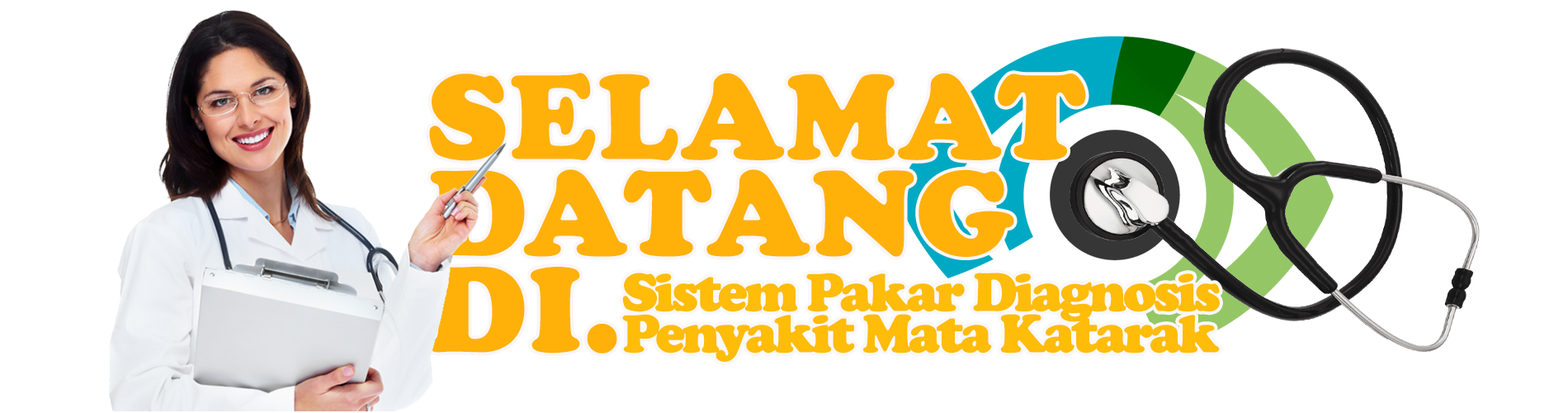
<style>
.page{position:relative;width:1568px;height:413px;background:#ffffff}
.page>*{position:absolute;margin:0}
.t1{font:123.8px/96.3px "CooperBlack";letter-spacing:-0.005em;color:#ffb109;font-weight:bold}
.t2{font:55.2px/41.3px "CooperBlack";letter-spacing:-0.075em;color:#ffbc09;font-weight:bold}
</style>
<div class="page">
<p class="t1" style="left:428px;top:73px;width:658px;height:280px">SELAMAT <br>DATANG<br>DI.</p>
<p class="t2" style="left:622px;top:272px;width:598px;height:89px">Sistem Pakar Diagnosis<br>Penyakit Mata Katarak</p>
</div>
